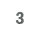
<style>
.page{position:relative;width:50px;height:40px;background:#ffffff}
.page>*{position:absolute;margin:0}
.t1{font:18px "FranklinGothic-DemiCond";color:#646768}
</style>
<div class="page">
<p class="t1" style="left:15px;top:12px;width:9px;height:12px">3</p>
</div>
